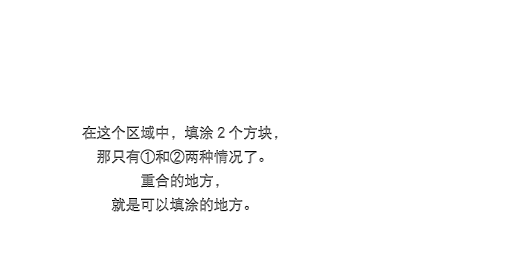
<style>
.page{position:relative;width:512px;height:256px;background:#ffffff}
.page>*{position:absolute;margin:0}
.t1{font:14.7px/24px "DFPHeiW5-GB"}
</style>
<div class="page">
<p class="t1" style="left:82px;top:125px;width:196px;height:87px;text-align:center">在这个区域中，填涂２个方块，<br>那只有①和②两种情况了。<br>重合的地方，<br>就是可以填涂的地方。</p>
</div>
